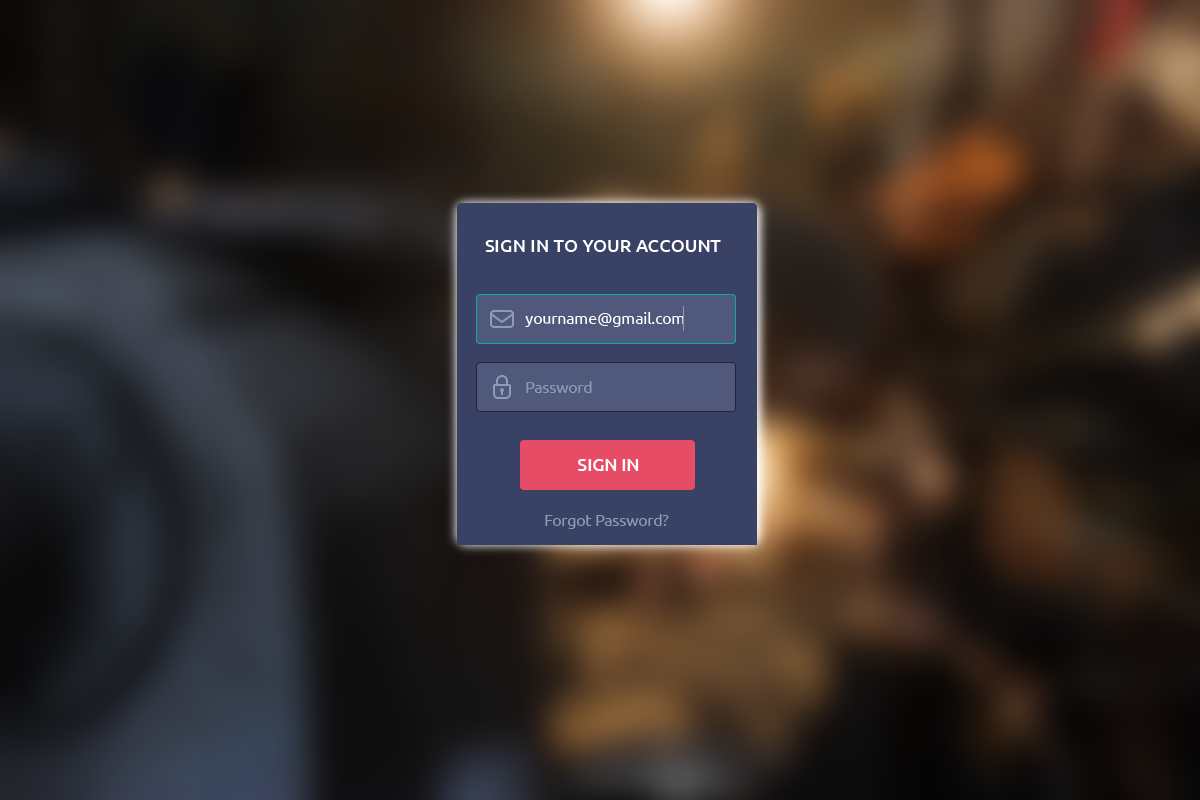
<style>
.page{position:relative;width:1200px;height:800px}
.page>*{position:absolute;margin:0}
.t1{font:18px "Ubuntu-Medium";color:#ffffff;text-transform:uppercase}
.t2{font:16px "Ubuntu";color:#ffffff}
.t3{font:16px "Ubuntu";color:#9099b7}
.t4{font:18px "Ubuntu-Medium";color:#ffffff}
</style>
<div class="page">
<p class="t1" style="left:485px;top:240px;width:236px;height:12px">Sign in to your account</p>
<p class="t2" style="left:525px;top:312px;width:159px;height:15px">yourname@gmail.com</p>
<p class="t3" style="left:526px;top:381px;width:66px;height:12px">Password</p>
<p class="t4" style="left:577px;top:459px;width:62px;height:12px">SIGN IN</p>
<p class="t3" style="left:545px;top:514px;width:124px;height:15px">Forgot Password?</p>
</div>
